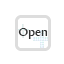
<style>
.page{position:relative;width:64px;height:64px;background:#ffffff}
.page>*{position:absolute;margin:0}
.t1{font:12px "AmiraParadiso";color:#333333}
</style>
<div class="page">
<p class="t1" style="left:18px;top:28px;width:30px;height:11px">Open</p>
</div>
